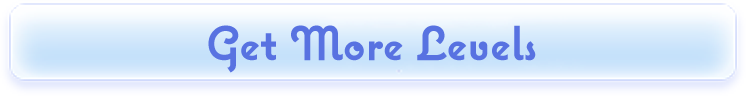
<style>
.page{position:relative;width:746px;height:96px}
.page>*{position:absolute;margin:0}
.t1{font:48px "CoquetteBold";color:#5872e1}
</style>
<div class="page">
<p class="t1" style="left:208px;top:25px;width:328px;height:48px">Get More Levels</p>
</div>
